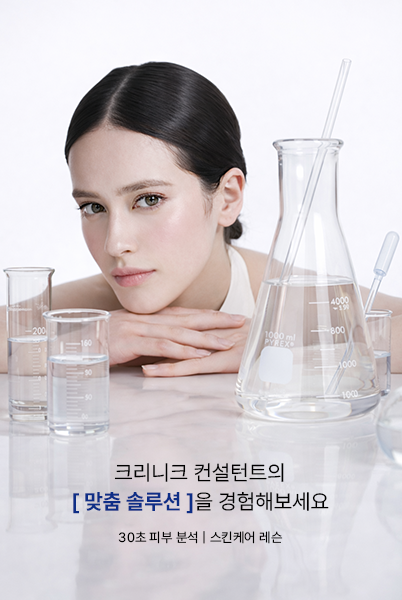
<style>
.page{position:relative;width:402px;height:600px}
.page>*{position:absolute;margin:0}
.t1{font:21.3px/26.7px "Pretendard-Regular";color:#000000}
.t2{font:21.3px/26.7px "Pretendard-Bold";color:#0e2e87}
.t3{font:13.3px "Pretendard-Regular";color:#000000;text-transform:uppercase}
</style>
<div class="page">
<p class="t1" style="left:73px;top:463px;width:256px;height:51px;text-align:center">크리니크 컨설턴트의<br><span class="t2">[ 맞춤 솔루션 ]</span>을 경험해보세요</p>
<p class="t3" style="left:118px;top:531px;width:165px;height:13px">30초 피부 분석 | 스킨케어 레슨</p>
</div>
